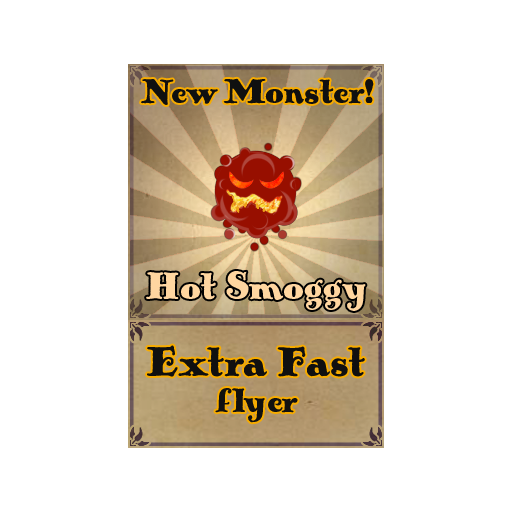
<style>
.page{position:relative;width:512px;height:512px;background:#ffffff}
.page>*{position:absolute;margin:0}
.t1{font:36px "PickworthOldStylePro";color:#101010}
.t2{font:40px "PickworthOldStylePro";color:#ffd6a0}
.t3{font:44px/36px "PickworthOldStylePro";color:#101010}
.t4{font:36px/36px "PickworthOldStylePro";color:#101010}
</style>
<div class="page">
<p class="t1" style="left:141px;top:78px;width:233px;height:27px">New Monster!</p>
<p class="t2" style="left:146px;top:271px;width:220px;height:40px">Hot Smoggy</p>
<p class="t3" style="left:147px;top:345px;width:218px;height:78px;text-align:center">Extra Fast<br><span class="t4">flyer</span></p>
</div>
